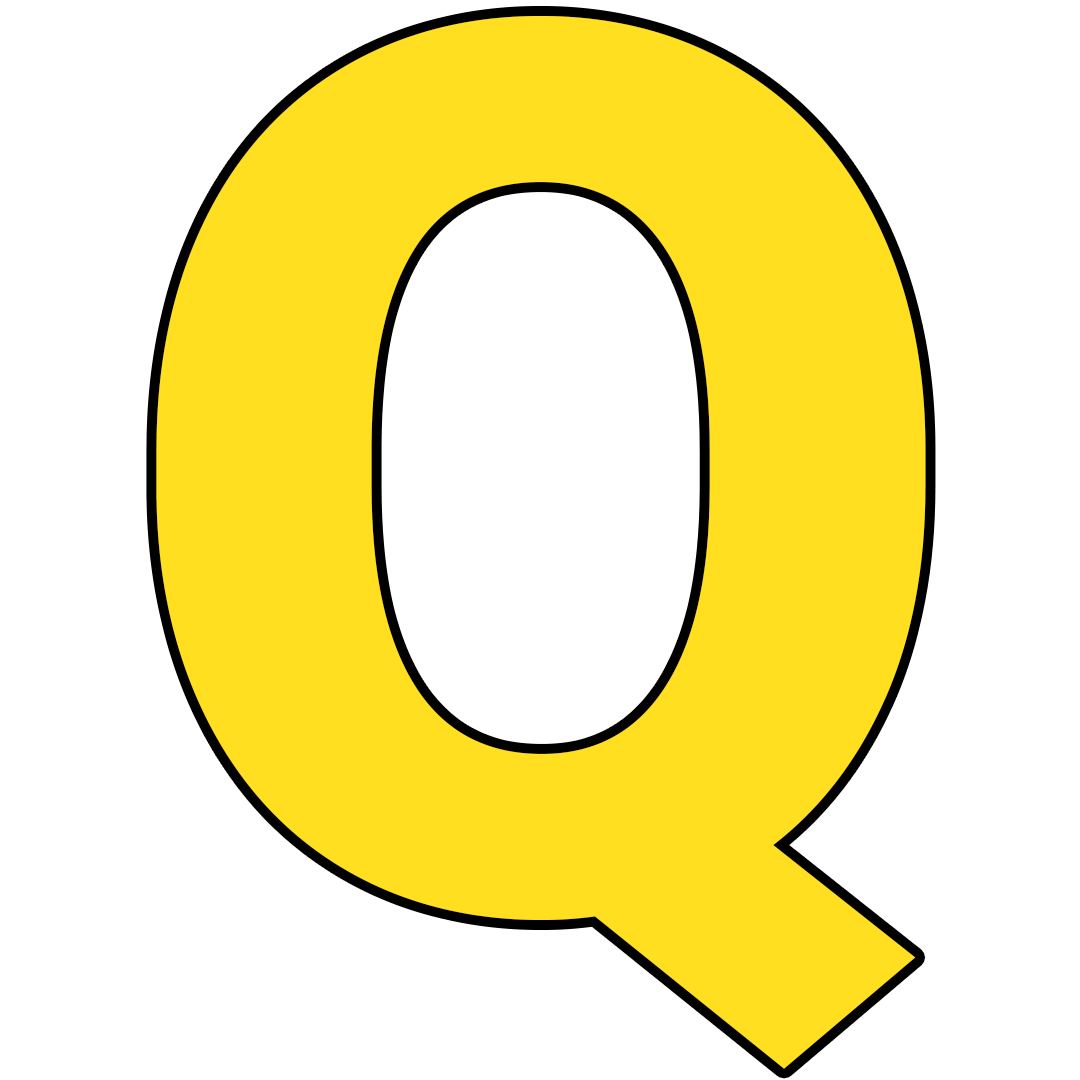
<style>
.page{position:relative;width:1080px;height:1080px;background:#ffffff}
.page>*{position:absolute;margin:0}
.t1{font:1237px "Roboto-Black";color:#ffdf20}
</style>
<div class="page">
<p class="t1" style="left:156px;top:16px;width:770px;height:1053px">Q</p>
</div>
